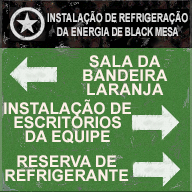
<style>
.page{position:relative;width:192px;height:192px}
.page>*{position:absolute;margin:0}
.t1{font:12px "Arial-BoldMT";letter-spacing:-0.05em;color:#dddddd;text-transform:uppercase;scale:0.73 1}
.t2{font:12px "Arial-BoldMT";letter-spacing:-0.05em;color:#dddddd;scale:0.73 1}
.t3{font:16px/14px "Arial-BoldMT";letter-spacing:0.02em;color:#fcf0e6}
.t4{font:16px/14px "Arial-BoldMT";color:#fcf0e6}
</style>
<div class="page">
<p class="t1" style="left:47px;top:11px;width:141px;height:26px;text-align:center">Instalação DE REFRIGERAÇÃO<br>DA ENERGIA <span class="t2">DE BLACK MESA</span></p>
<p class="t3" style="left:83px;top:55px;width:85px;height:41px;text-align:center">SALA DA<br>BANDEIRA<br>LARANJA</p>
<p class="t4" style="left:4px;top:99px;width:127px;height:45px;text-align:center">INSTALAÇÃO DE<br>ESCRITÓRIOS<br>DA EQUIPE</p>
<p class="t4" style="left:5px;top:155px;width:123px;height:27px;text-align:center">RESERVA DE<br>REFRIGERANTE</p>
</div>
